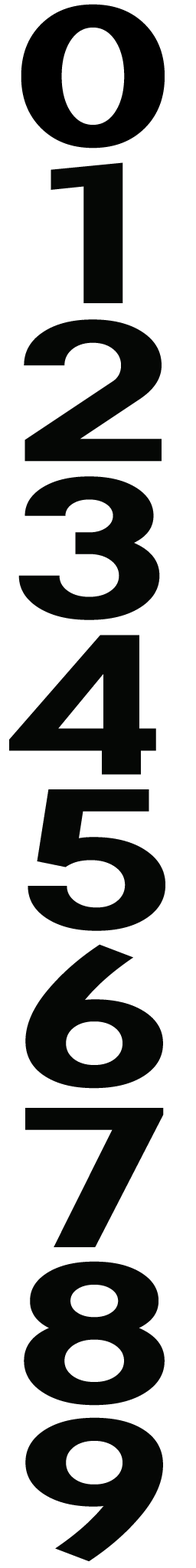
<style>
.page{position:relative;width:196px;height:1568px;background:#ffffff}
.page>*{position:absolute;margin:0}
.t1{font:199.1px "ProbaPro-Bold";letter-spacing:0.025em;color:#000000;scale:1.5 1}
.t2{font:199.1px "ProbaPro-Bold";letter-spacing:0.025em;color:#050705;scale:1.5 1}
</style>
<div class="page">
<p class="t1" style="left:21px;top:4px;width:144px;height:145px">0</p>
<p class="t2" style="left:51px;top:162px;width:72px;height:141px">1</p>
<p class="t2" style="left:24px;top:319px;width:138px;height:143px">2</p>
<p class="t2" style="left:18px;top:476px;width:142px;height:144px">3</p>
<p class="t2" style="left:9px;top:635px;width:147px;height:140px">4</p>
<p class="t2" style="left:28px;top:789px;width:137px;height:142px">5</p>
<p class="t2" style="left:25px;top:944px;width:138px;height:145px">6</p>
<p class="t2" style="left:25px;top:1108px;width:139px;height:139px">7</p>
<p class="t2" style="left:24px;top:1261px;width:141px;height:145px">8</p>
<p class="t2" style="left:25px;top:1417px;width:138px;height:145px">9</p>
</div>
